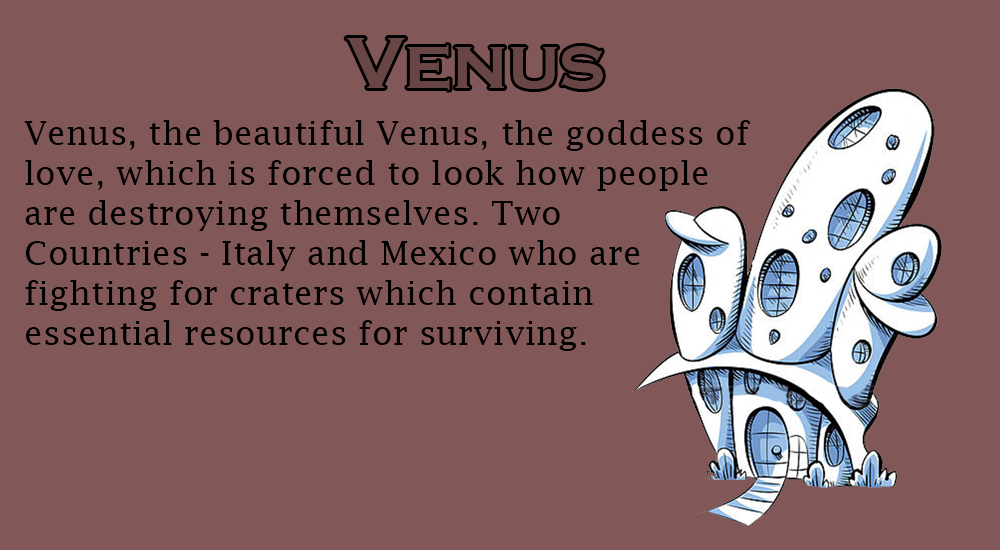
<style>
.page{position:relative;width:1000px;height:550px;background:#815757}
.page>*{position:absolute;margin:0}
.t1{font:33.3px "LucidaFax";color:#000000}
</style>
<div class="page">
<p class="t1" style="left:24px;top:120px;width:726px;height:231px">Venus, the beautiful Venus, the goddess of<br>love, which is forced to look how people<br>are destroying themselves. Two<br>Countries - Italy and Mexico who are<br>fighting for craters which contain<br>essential resources for surviving.</p>
</div>
